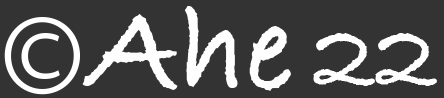
<style>
.page{position:relative;width:444px;height:98px;background:#333333}
.page>*{position:absolute;margin:0}
.t1{font:125px "BradleyHandITCTT-Bold";color:#fefefe}
.t2{font:125px "MyriadPro-Regular";color:#ffffff}
.t3{font:100px "BradleyHandITCTT-Bold";color:#ffffff}
</style>
<div class="page">
<p class="t1" style="left:82px;top:6px;width:209px;height:85px">Ahe</p>
<p class="t2" style="left:4px;top:17px;width:76px;height:78px">©</p>
<p class="t3" style="left:313px;top:33px;width:124px;height:53px">22</p>
</div>
